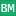
<style>
.page{position:relative;width:16px;height:16px;background:#16af69}
.page>*{position:absolute;margin:0}
.t1{font:12px "LucidaConsole";color:#ffffff}
</style>
<div class="page">
<p class="t1" style="left:1px;top:4px;width:14px;height:8px">BM</p>
</div>
